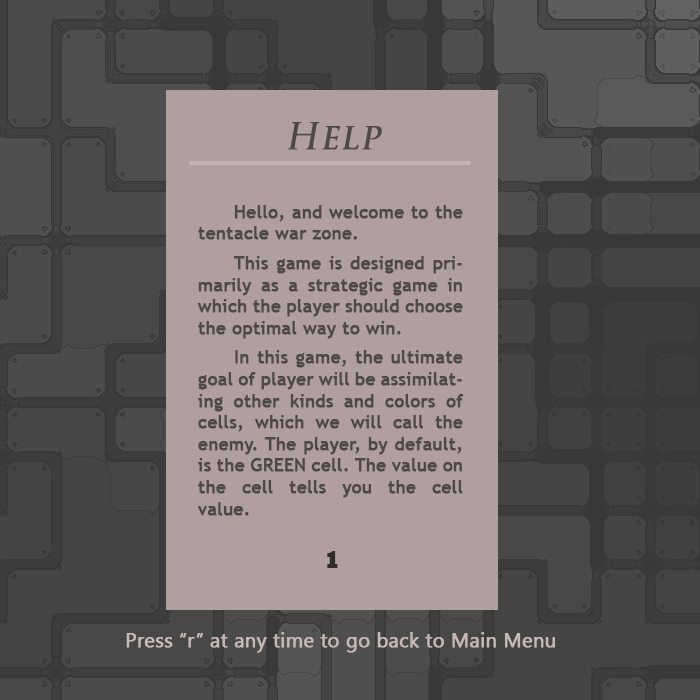
<style>
.page{position:relative;width:700px;height:700px;background:#b19f9f}
.page>*{position:absolute;margin:0}
.t1{font:35px "TrajanPro-Regular";color:#4d4949;font-weight:bold;font-style:italic}
.t2{font:18px "TrebuchetMS";color:#4d4949;font-weight:bold}
.t3{font:25px "Rockwell-ExtraBold";color:#2e2b2b}
.t4{font:20px "SegoeUISymbol";color:#c9b8b8;font-weight:bold}
</style>
<div class="page">
<p class="t1" style="left:287px;top:122px;width:95px;height:28px">Help</p>
<p class="t2" style="left:197px;top:205px;width:267px;height:311px;text-align:justify"><span class="t1"> </span>Hello, and welcome to the tentacle war zone.<br> This game is designed primarily as a strategic game in which the player should choose the optimal way to win.<br> In this game, the ultimate goal of player will be assimilating other kinds and colors of cells, which we will call the enemy. The player, by default, is the GREEN cell. The value on the cell tells you the cell value.</p>
<p class="t3" style="left:327px;top:551px;width:11px;height:17px">1</p>
<p class="t4" style="left:126px;top:632px;width:429px;height:21px">Press “r” at any time to go back to Main Menu</p>
</div>
